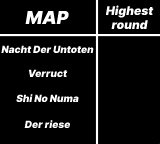
<style>
.page{position:relative;width:160px;height:144px;background:#000000}
.page>*{position:absolute;margin:0}
.t1{font:12px "InterUI-BlackItalic";color:#ffffff}
.t2{font:18px "InterUI-BlackItalic";color:#ffffff}
.t3{font:10px "InterUI-BlackItalic";color:#ffffff}
</style>
<div class="page">
<p class="t1" style="left:105px;top:5px;width:49px;height:25px;text-align:center">Highest round</p>
<p class="t2" style="left:25px;top:10px;width:44px;height:14px">MAP</p>
<p class="t3" style="left:1px;top:45px;width:93px;height:9px">Nacht Der Untoten</p>
<p class="t3" style="left:28px;top:69px;width:40px;height:9px">Verruct</p>
<p class="t3" style="left:16px;top:94px;width:63px;height:9px">Shi No Numa</p>
<p class="t3" style="left:24px;top:120px;width:47px;height:9px">Der riese</p>
</div>
